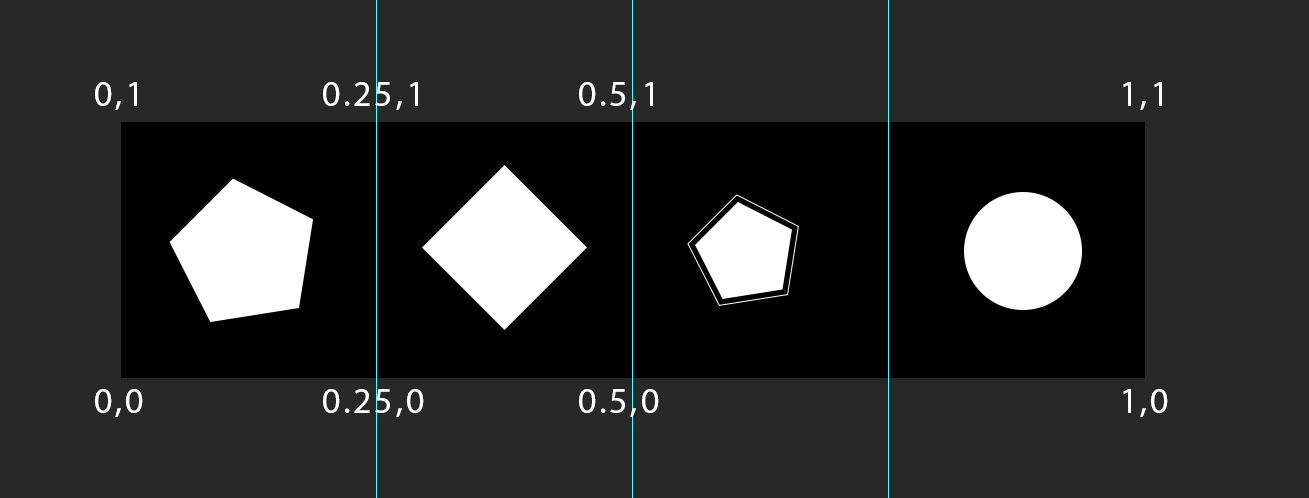
<style>
.page{position:relative;width:1309px;height:498px;background:#282828}
.page>*{position:absolute;margin:0}
.t1{font:36px "MyriadPro-Regular";letter-spacing:0.075em;color:#ffffff}
</style>
<div class="page">
<p class="t1" style="left:95px;top:82px;width:42px;height:28px">0,1</p>
<p class="t1" style="left:323px;top:82px;width:95px;height:28px">0.25,1</p>
<p class="t1" style="left:579px;top:82px;width:74px;height:28px">0.5,1</p>
<p class="t1" style="left:1123px;top:82px;width:39px;height:28px">1,1</p>
<p class="t1" style="left:95px;top:389px;width:48px;height:28px">0,0</p>
<p class="t1" style="left:323px;top:389px;width:101px;height:28px">0.25,0</p>
<p class="t1" style="left:579px;top:389px;width:80px;height:28px">0.5,0</p>
<p class="t1" style="left:1123px;top:389px;width:45px;height:28px">1,0</p>
</div>
